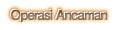
<style>
.page{position:relative;width:118px;height:30px;background:#ffffff}
.page>*{position:absolute;margin:0}
.t1{font:13px "FutoGoB101Pr5-Bold";letter-spacing:-0.08em;color:#88725a;font-weight:bold}
</style>
<div class="page">
<p class="t1" style="left:11px;top:9px;width:97px;height:13px">Operasi Ancaman</p>
</div>
